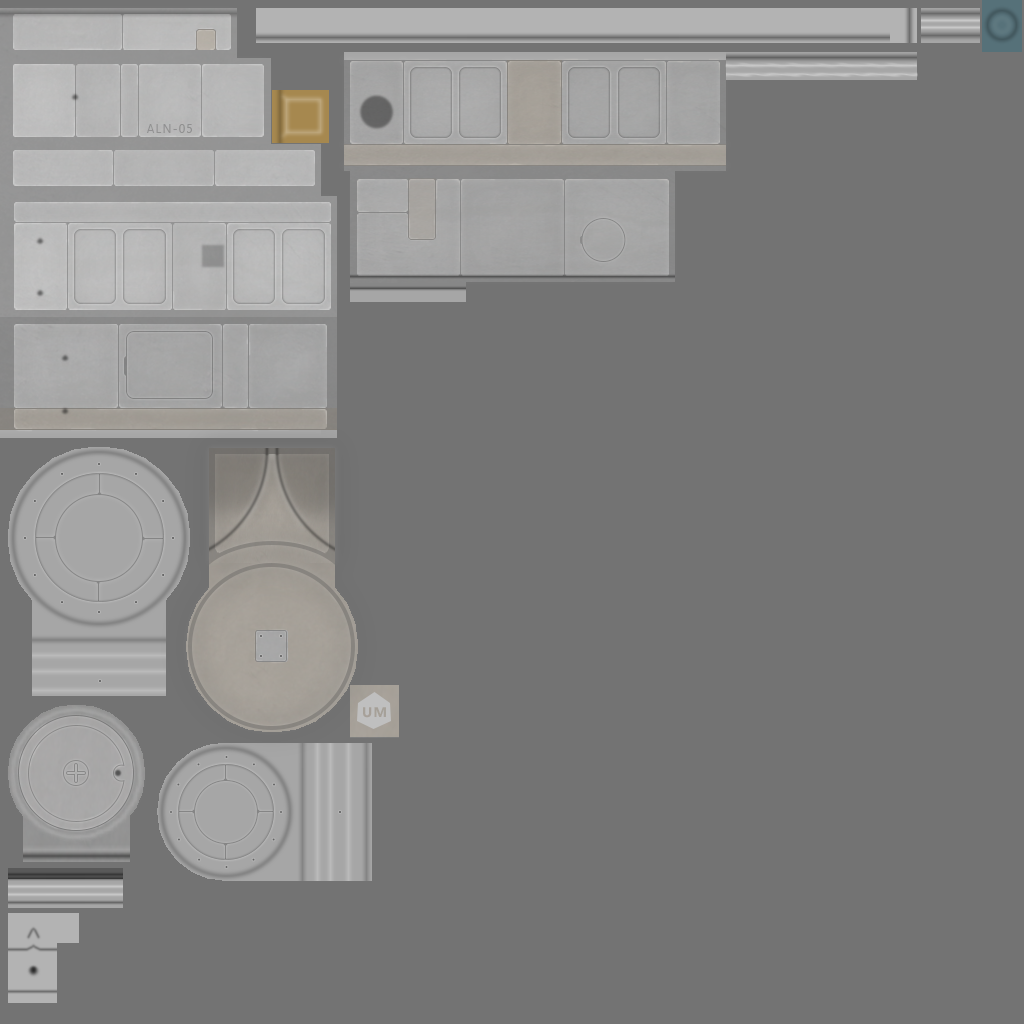
<style>
.page{position:relative;width:1024px;height:1024px;background:#737373}
.page>*{position:absolute;margin:0}
.t1{font:12px "SegoeUI";letter-spacing:0.1em;color:#919191}
</style>
<div class="page">
<p class="t1" style="left:147px;top:124px;width:45px;height:9px">ALN-05</p>
</div>
